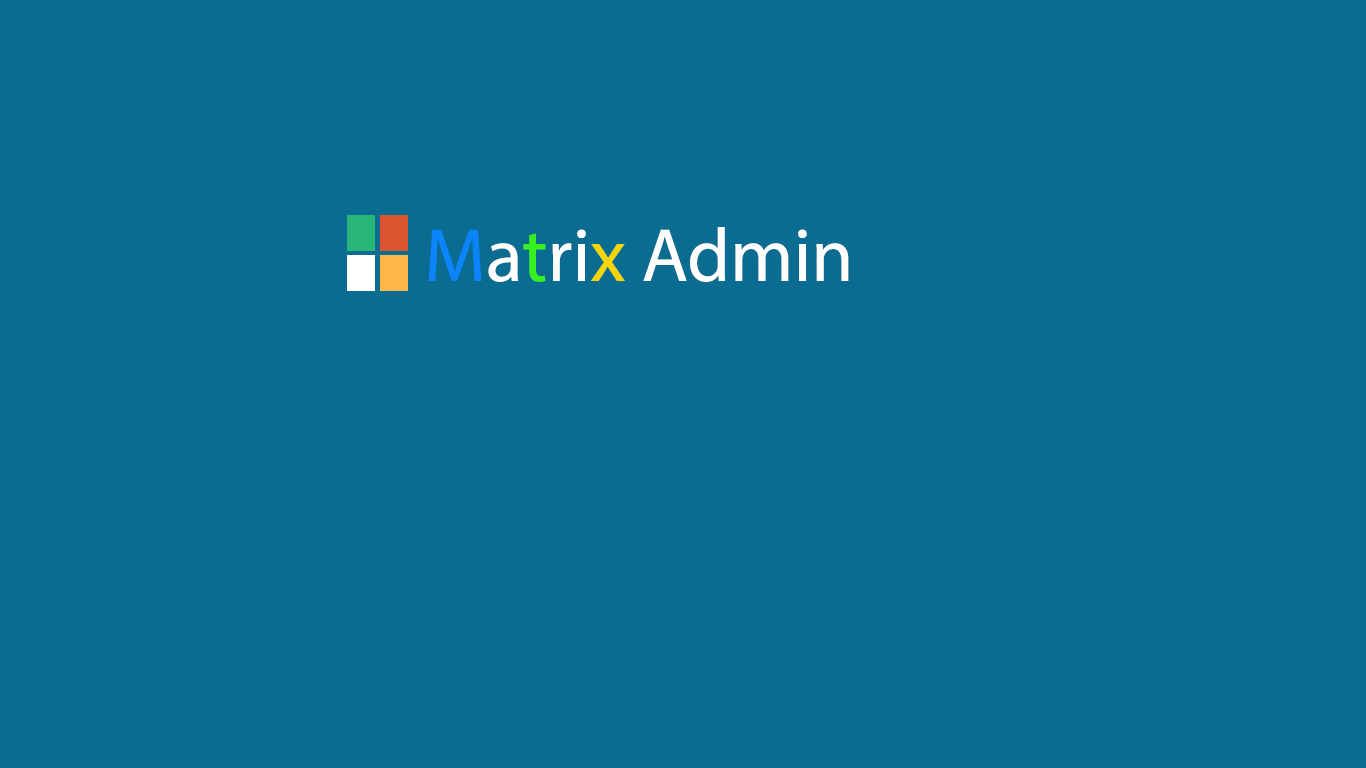
<style>
.page{position:relative;width:1366px;height:768px;background:#0a6c90}
.page>*{position:absolute;margin:0}
.t1{font:76px "MyriadPro-Regular";color:#ffffff}
.t2{font:76px "MyriadPro-Regular";color:#0c84fe}
.t3{font:76px "MyriadPro-Regular";color:#38f020}
.t4{font:76px "MyriadPro-Regular";color:#f4d506}
</style>
<div class="page">
<p class="t1" style="left:428px;top:227px;width:421px;height:55px"><span class="t2">M</span>a<span class="t3">t</span>ri<span class="t4">x </span>Admin</p>
</div>
